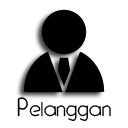
<style>
.page{position:relative;width:128px;height:128px;background:#ffffff}
.page>*{position:absolute;margin:0}
.t1{font:26.2px "ModenoLX";color:#000000}
</style>
<div class="page">
<p class="t1" style="left:17px;top:97px;width:94px;height:24px">Pelanggan</p>
</div>
